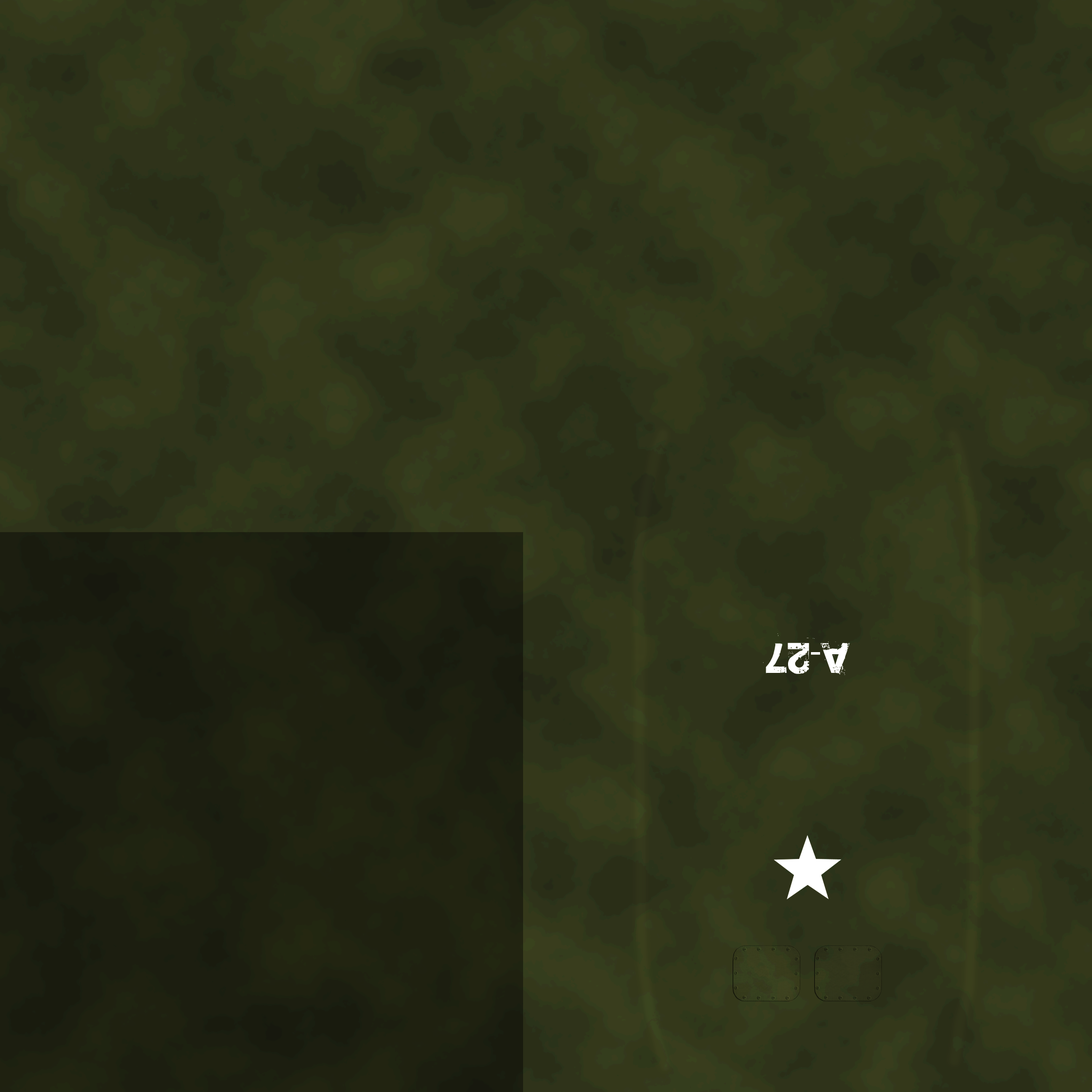
<style>
.page{position:relative;width:1092px;height:1092px;background:#2f331a}
.page>*{position:absolute;margin:0}
.t1{font:38px "Base02";color:#ffffff;font-variant:small-caps}
.t2{font:38px "MyriadPro-Regular";color:#ffffff;font-variant:small-caps}
</style>
<div class="page">
<p class="t1" style="left:763px;top:633px;width:87px;height:42px;rotate:180deg">A<span class="t2">-</span>27</p>
</div>
